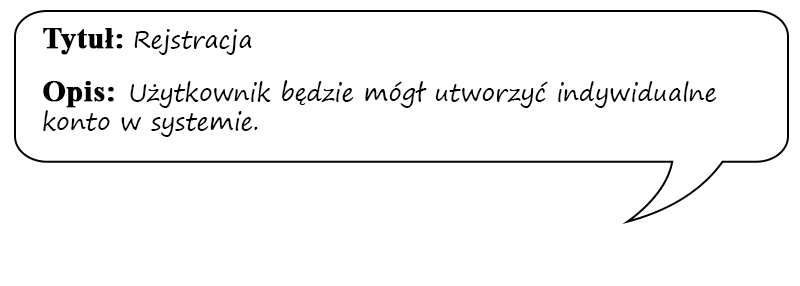
<style>
.page{position:relative;width:800px;height:286px;background:#ffffff}
.page>*{position:absolute;margin:0}
.t1{font:24px "SegoePrint";color:#000000}
.t2{font:30px "TimesNewRomanPS-BoldMT";color:#000000;font-weight:bold}
</style>
<div class="page">
<p class="t1" style="left:43px;top:28px;width:674px;height:109px"><span class="t2">Tytuł: </span>Rejstracja<br><br><span class="t2">Opis:  </span>Użytkownik będzie mógł utworzyć indywidualne konto w systemie.</p>
</div>
